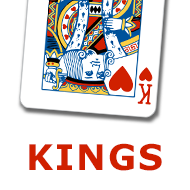
<style>
.page{position:relative;width:190px;height:190px;background:#ffffff}
.page>*{position:absolute;margin:0}
.t1{font:35.4px "Verdana-Bold";letter-spacing:0.05em;color:#d02000}
</style>
<div class="page">
<p class="t1" style="left:29px;top:143px;width:133px;height:28px">KINGS</p>
</div>
